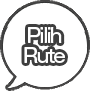
<style>
.page{position:relative;width:90px;height:91px;background:#ffffff}
.page>*{position:absolute;margin:0}
.t1{font:19px/20px "GothicMB101Pro-Medium";letter-spacing:-0.08em;color:#ffffff;scale:0.95 1}
</style>
<div class="page">
<p class="t1" style="left:24px;top:27px;width:41px;height:36px;text-align:center">Pilih<br>Rute</p>
</div>
